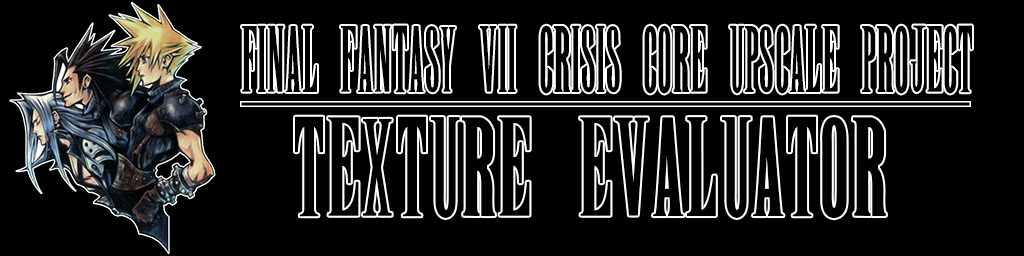
<style>
.page{position:relative;width:1024px;height:256px;background:#000000}
.page>*{position:absolute;margin:0}
.t1{font:68.6px "New";color:#000000;scale:0.72 1}
.t2{font:102.5px "New";color:#000000}
</style>
<div class="page">
<p class="t1" style="left:242px;top:25px;width:730px;height:69px">FINAL FANTASY VII CRISIS CORE UPSCALE PROJECT</p>
<p class="t2" style="left:295px;top:116px;width:591px;height:103px">TEXTURE EVALUATOR</p>
</div>
